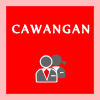
<style>
.page{position:relative;width:100px;height:100px;background:#ff0000}
.page>*{position:absolute;margin:0}
.t1{font:14px "Nyala-Regular";letter-spacing:0.075em;color:#ffffff;font-weight:bold}
</style>
<div class="page">
<p class="t1" style="left:12px;top:24px;width:78px;height:10px">CAWANGAN</p>
</div>
